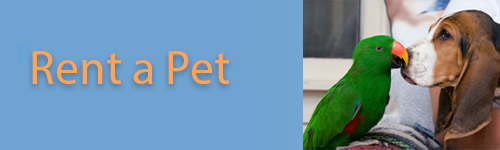
<style>
.page{position:relative;width:500px;height:150px;background:#6fa3d1}
.page>*{position:absolute;margin:0}
.t1{font:26px "MyriadPro-Regular";color:#5ca5e0}
.t2{font:48px "MyriadPro-Regular";color:#ffa452}
</style>
<div class="page">
<p class="t1" style="left:19px;top:46px;width:12px;height:18px">R</p>
<p class="t2" style="left:32px;top:51px;width:197px;height:33px">Rent a Pet</p>
</div>
